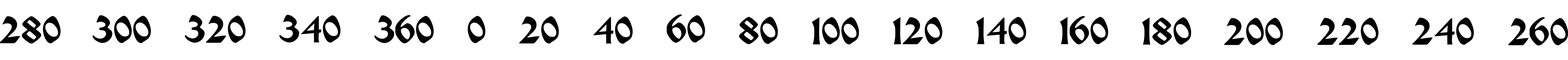
<style>
.page{position:relative;width:1568px;height:60px;background:#ffffff}
.page>*{position:absolute;margin:0}
.t1{font:44.3px "MorrisRoman-Black";color:#000000}
</style>
<div class="page">
<p class="t1" style="left:0px;top:16px;width:61px;height:27px">280</p>
<p class="t1" style="left:93px;top:15px;width:58px;height:28px">300</p>
<p class="t1" style="left:185px;top:15px;width:60px;height:28px">320</p>
<p class="t1" style="left:279px;top:15px;width:61px;height:28px">340</p>
<p class="t1" style="left:374px;top:15px;width:60px;height:28px">360</p>
<p class="t1" style="left:468px;top:16px;width:17px;height:27px">0</p>
<p class="t1" style="left:519px;top:16px;width:40px;height:27px">20</p>
<p class="t1" style="left:593px;top:16px;width:40px;height:28px">40</p>
<p class="t1" style="left:667px;top:14px;width:38px;height:29px">60</p>
<p class="t1" style="left:739px;top:17px;width:39px;height:27px">80</p>
<p class="t1" style="left:812px;top:17px;width:47px;height:27px">100</p>
<p class="t1" style="left:893px;top:17px;width:49px;height:27px">120</p>
<p class="t1" style="left:976px;top:17px;width:50px;height:27px">140</p>
<p class="t1" style="left:1060px;top:16px;width:48px;height:28px">160</p>
<p class="t1" style="left:1142px;top:17px;width:49px;height:28px">180</p>
<p class="t1" style="left:1224px;top:18px;width:59px;height:27px">200</p>
<p class="t1" style="left:1318px;top:18px;width:60px;height:27px">220</p>
<p class="t1" style="left:1412px;top:17px;width:62px;height:28px">240</p>
<p class="t1" style="left:1508px;top:17px;width:60px;height:28px">260</p>
</div>
